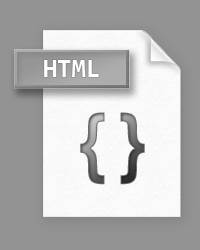
<style>
.page{position:relative;width:200px;height:250px;background:#939393}
.page>*{position:absolute;margin:0}
.t1{font:26px "Consolas-Bold";color:#ffffff}
.t2{font:76.5px "Impact";scale:0.96 1}
</style>
<div class="page">
<p class="t1" style="left:44px;top:60px;width:55px;height:17px">HTML</p>
<p class="t2" style="left:80px;top:112px;width:65px;height:73px">{ }</p>
</div>
